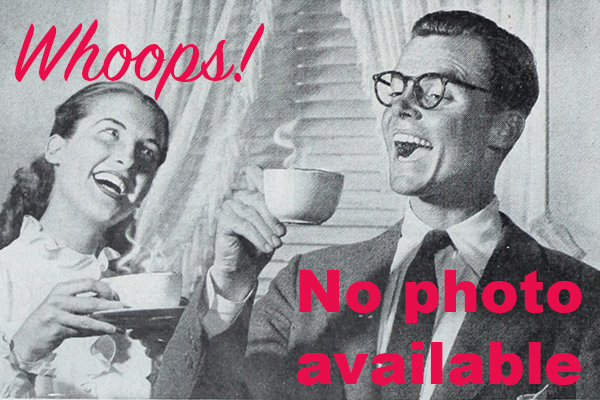
<style>
.page{position:relative;width:600px;height:400px}
.page>*{position:absolute;margin:0}
.t1{font:158.2px "SignPainter-HouseScript";color:#e80e4b}
.t2{font:100px/72px "Arial-Black";color:#e80e4b}
</style>
<div class="page">
<p class="t1" style="left:15px;top:19px;width:250px;height:82px">Whoops!</p>
<p class="t2" style="left:297px;top:270px;width:285px;height:115px;text-align:center">No photo<br>available</p>
</div>
